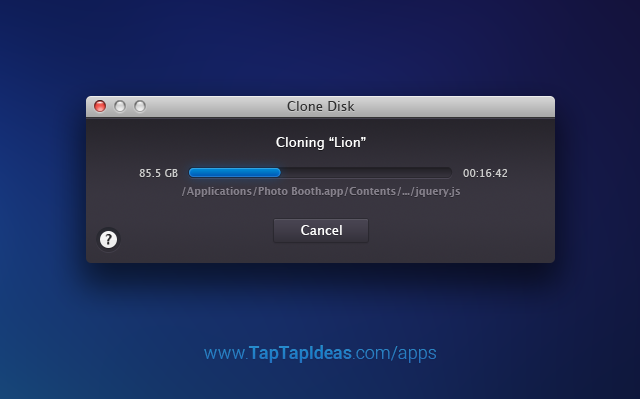
<style>
.page{position:relative;width:640px;height:399px}
.page>*{position:absolute;margin:0}
.t1{font:13px "LucidaGrande";color:#303030}
.t2{font:13px "LucidaGrande";color:#ffffff}
.t3{font:10px "LucidaGrande";letter-spacing:0.01em;color:#cccccc}
.t4{font:10px "LucidaGrande-Bold";letter-spacing:0.01em;color:#86818c}
.t5{font:13px "LucidaGrande-Bold";color:#272727}
.t6{font:18px "Roboto-Medium";color:#2481c7}
.t7{font:18px "Roboto-Light";color:#2481c7}
</style>
<div class="page">
<p class="t1" style="left:287px;top:101px;width:68px;height:10px">Clone Disk</p>
<p class="t2" style="left:276px;top:137px;width:90px;height:13px">Cloning “Lion”</p>
<p class="t3" style="left:139px;top:169px;width:39px;height:8px">85.5 GB</p>
<p class="t3" style="left:463px;top:169px;width:44px;height:8px">00:16:42</p>
<p class="t4" style="left:182px;top:187px;width:278px;height:10px">/Applications/Photo Booth.app/Contents/.../jquery.js</p>
<p class="t2" style="left:301px;top:225px;width:41px;height:10px">Cancel</p>
<p class="t5" style="left:105px;top:234px;width:7px;height:10px">?</p>
<p class="t6" style="left:204px;top:345px;width:232px;height:18px"><span class="t7">www.</span>TapTapIdeas<span class="t7">.com/apps</span></p>
</div>
